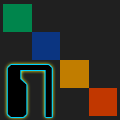
<style>
.page{position:relative;width:120px;height:120px;background:#202020}
.page>*{position:absolute;margin:0}
.t1{font:85.8px "Computerfont";color:#000000;scale:1.1 1}
</style>
<div class="page">
<p class="t1" style="left:7px;top:65px;width:45px;height:52px">N</p>
</div>
